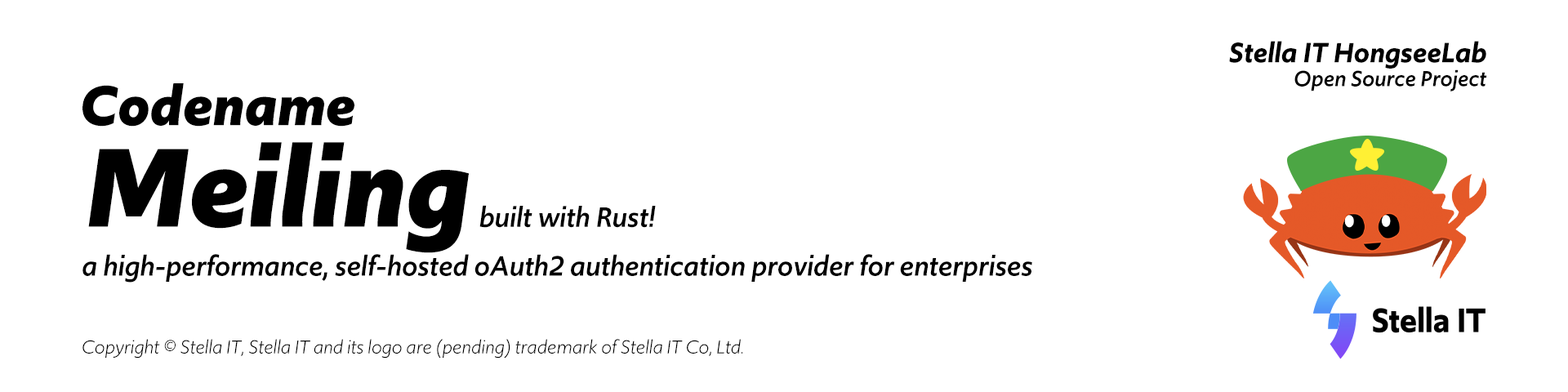
<style>
.page{position:relative;width:1568px;height:392px;background:#ffffff}
.page>*{position:absolute;margin:0}
.t1{font:29.4px/29.4px "Upgrade-SemiboldItalic";color:#000000}
.t2{font:22.9px/22.9px "Upgrade-MediumItalic";color:#000000}
.t3{font:58.8px "Upgrade-BoldItalic";color:#000000}
.t4{font:117.6px "Upgrade-BoldItalic";color:#000000}
.t5{font:29.4px "Upgrade-MediumItalic";color:#000000}
.t6{font:19.6px "Upgrade-BookItalic";color:#000000}
</style>
<div class="page">
<p class="t1" style="left:1229px;top:41px;width:258px;height:50px;text-align:right">Stella IT HongseeLab<br><span class="t2">Open Source Project</span></p>
<p class="t3" style="left:82px;top:83px;width:272px;height:44px">Codename</p>
<p class="t4" style="left:88px;top:142px;width:381px;height:111px">Meiling</p>
<p class="t5" style="left:479px;top:205px;width:177px;height:23px">built with Rust!</p>
<p class="t5" style="left:82px;top:254px;width:950px;height:29px">a high-performance, self-hosted oAuth2 authentication provider for enterprises</p>
<p class="t6" style="left:82px;top:339px;width:661px;height:20px">Copyright © Stella IT, Stella IT and its logo are (pending) trademark of Stella IT Co, Ltd.</p>
</div>
